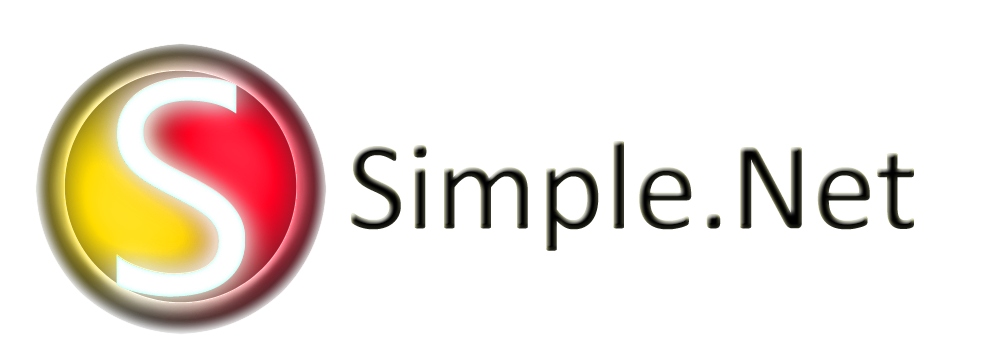
<style>
.page{position:relative;width:1008px;height:360px;background:#ffffff}
.page>*{position:absolute;margin:0}
.t1{font:128px "Calibri"}
</style>
<div class="page">
<p class="t1" style="left:350px;top:141px;width:564px;height:110px">Simple.Net</p>
</div>
